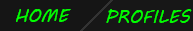
<style>
.page{position:relative;width:193px;height:31px;background:#151515}
.page>*{position:absolute;margin:0}
.t1{font:18px "MVBoli";color:#00ff00}
</style>
<div class="page">
<p class="t1" style="left:16px;top:9px;width:55px;height:13px">HOME</p>
<p class="t1" style="left:106px;top:9px;width:86px;height:14px">PROFILES</p>
</div>
